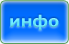
<style>
.page{position:relative;width:69px;height:44px}
.page>*{position:absolute;margin:0}
.t1{font:16px "Verdana-Bold";color:#65e5f8}
</style>
<div class="page">
<p class="t1" style="left:10px;top:14px;width:49px;height:17px">инфо</p>
</div>
